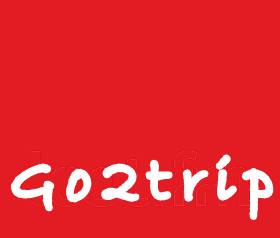
<style>
.page{position:relative;width:280px;height:238px;background:#e31b23}
.page>*{position:absolute;margin:0}
.t1{font:60px "BradleyHandITC";letter-spacing:0.2em;color:#ffffff}
</style>
<div class="page">
<p class="t1" style="left:13px;top:157px;width:258px;height:60px">Go2trip</p>
</div>
